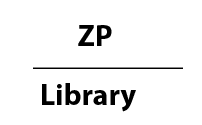
<style>
.page{position:relative;width:202px;height:125px;background:#ffffff}
.page>*{position:absolute;margin:0}
.t1{font:30px "MyriadPro-Bold";color:#000000}
</style>
<div class="page">
<p class="t1" style="left:78px;top:25px;width:34px;height:21px">ZP</p>
<p class="t1" style="left:33px;top:67px;width:150px;height:2px">__________</p>
<p class="t1" style="left:42px;top:83px;width:94px;height:29px">Library</p>
</div>
